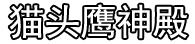
<style>
.page{position:relative;width:195px;height:44px;background:#ffffff}
.page>*{position:absolute;margin:0}
.t1{font:36px "SimHei";color:#ffffff}
</style>
<div class="page">
<p class="t1" style="left:9px;top:4px;width:179px;height:35px">猫头鹰神殿</p>
</div>
